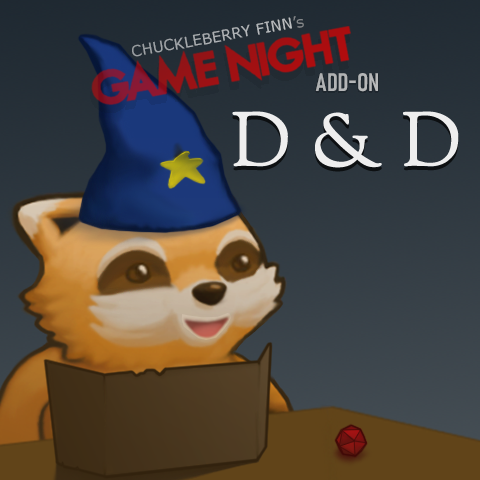
<style>
.page{position:relative;width:480px;height:480px}
.page>*{position:absolute;margin:0}
.t1{font:15px "Verdana";color:#ffffff}
.t2{font:15px "Verdana";color:#ababab}
.t3{font:25px "Bahnschrift-SemiBoldCondensed";color:#b4b5b7}
.t4{font:75px "OFLGoudyStM";color:#eeeeee;font-weight:bold}
</style>
<div class="page">
<p class="t1" style="left:132px;top:16px;width:172px;height:41px;rotate:-10deg">CHUCKLEBERRY FINN<span class="t2">’s</span></p>
<p class="t3" style="left:315px;top:73px;width:63px;height:19px">ADD-ON</p>
<p class="t4" style="left:232px;top:111px;width:227px;height:57px">D &amp; D</p>
</div>
